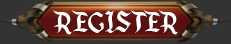
<style>
.page{position:relative;width:231px;height:44px;background:#333333}
.page>*{position:absolute;margin:0}
.t1{font:32px "EnchantedLand";color:#ffffff}
</style>
<div class="page">
<p class="t1" style="left:53px;top:10px;width:125px;height:25px">REGISTER</p>
</div>
